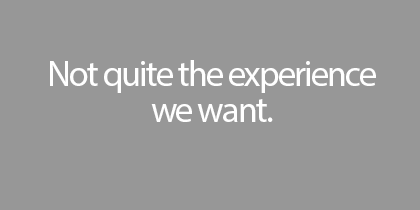
<style>
.page{position:relative;width:420px;height:210px;background:#979797}
.page>*{position:absolute;margin:0}
.t1{font:36px/36px "MyriadPro-Regular";letter-spacing:-0.05em;color:#ffffff}
</style>
<div class="page">
<p class="t1" style="left:50px;top:60px;width:326px;height:62px;text-align:center">Not quite the experience<br>we want.</p>
</div>
